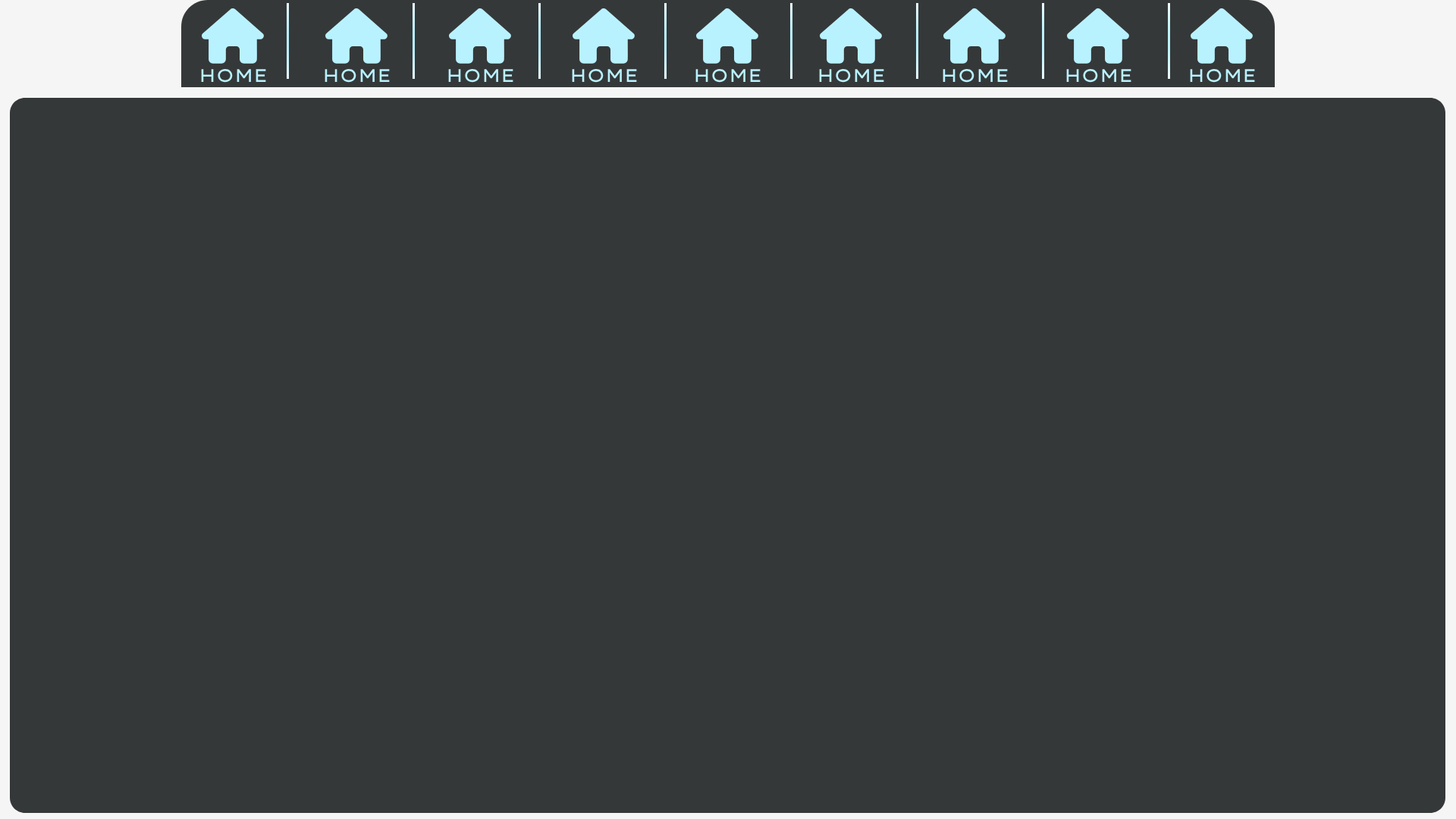
<style>
.page{position:relative;width:1456px;height:819px;background:#353839}
.page>*{position:absolute;margin:0}
.t1{font:18.2px "LexendMega-Regular";color:#b9f2ff}
</style>
<div class="page">
<p class="t1" style="left:201px;top:68px;width:65px;height:15px">HOME</p>
<p class="t1" style="left:325px;top:68px;width:65px;height:15px">HOME</p>
<p class="t1" style="left:448px;top:68px;width:65px;height:15px">HOME</p>
<p class="t1" style="left:572px;top:68px;width:65px;height:15px">HOME</p>
<p class="t1" style="left:695px;top:68px;width:66px;height:15px">HOME</p>
<p class="t1" style="left:819px;top:68px;width:65px;height:15px">HOME</p>
<p class="t1" style="left:943px;top:68px;width:65px;height:15px">HOME</p>
<p class="t1" style="left:1066px;top:68px;width:65px;height:15px">HOME</p>
<p class="t1" style="left:1190px;top:68px;width:65px;height:15px">HOME</p>
</div>
